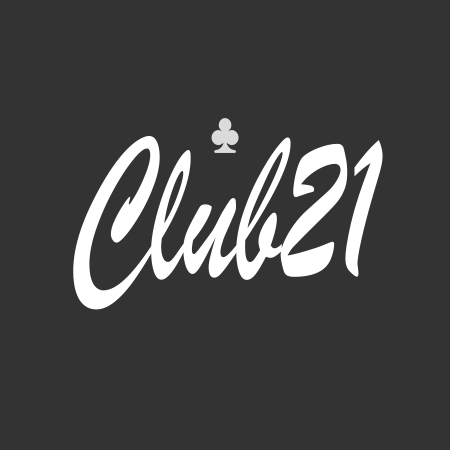
<style>
.page{position:relative;width:450px;height:450px;background:#333333}
.page>*{position:absolute;margin:0}
.t1{font:216.3px "BrushScriptMT";color:#ffffff;scale:0.64 1}
</style>
<div class="page">
<p class="t1" style="left:73px;top:135px;width:310px;height:175px">Club21</p>
</div>
